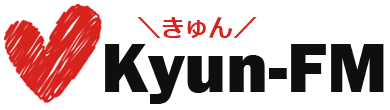
<style>
.page{position:relative;width:390px;height:110px;background:#ffffff}
.page>*{position:absolute;margin:0}
.t1{font:24px "Meiryo-Bold";color:#d7221d}
.t2{font:72px "FranklinGothic-Heavy";color:#0f0f0f}
</style>
<div class="page">
<p class="t1" style="left:137px;top:17px;width:120px;height:21px">＼きゅん／</p>
<p class="t2" style="left:105px;top:44px;width:279px;height:60px">Kyun-FM</p>
</div>
